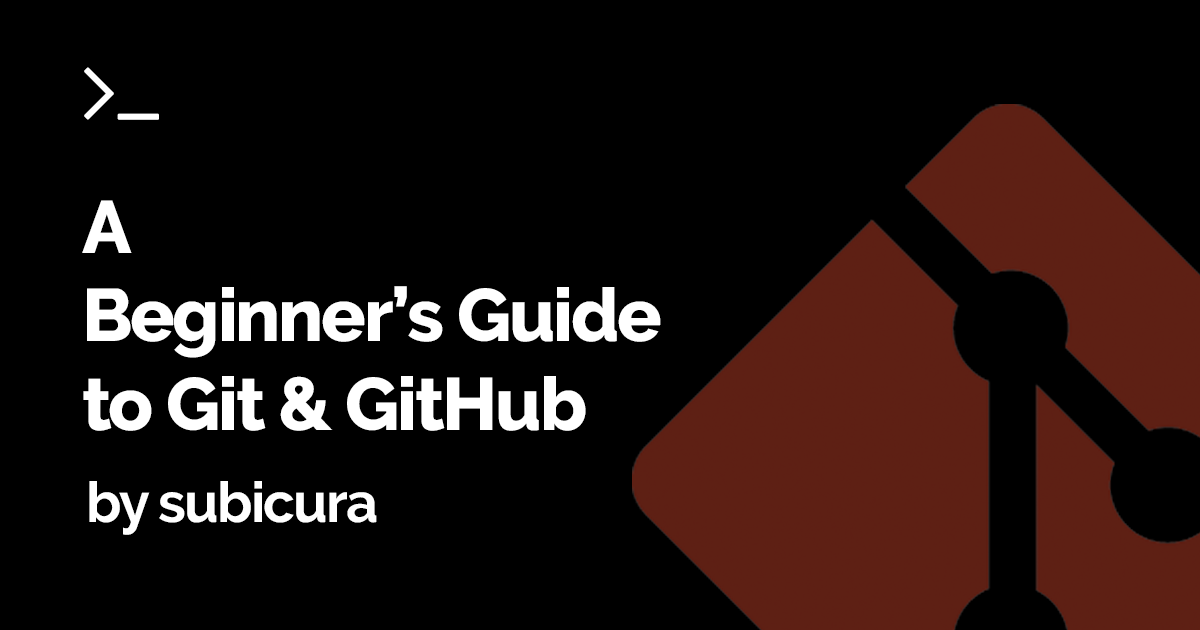
<style>
.page{position:relative;width:1200px;height:630px;background:#000000}
.page>*{position:absolute;margin:0}
.t1{font:74px "Raleway-ExtraBold";letter-spacing:-0.03em;color:#ffffff}
.t2{font:56px "Raleway-Bold";letter-spacing:-0.03em;color:#ffffff}
</style>
<div class="page">
<p class="t1" style="left:82px;top:200px;width:579px;height:231px">A<br>Beginner’s Guide<br>to Git &amp; GitHub</p>
<p class="t2" style="left:89px;top:481px;width:288px;height:54px">by subicura</p>
</div>
